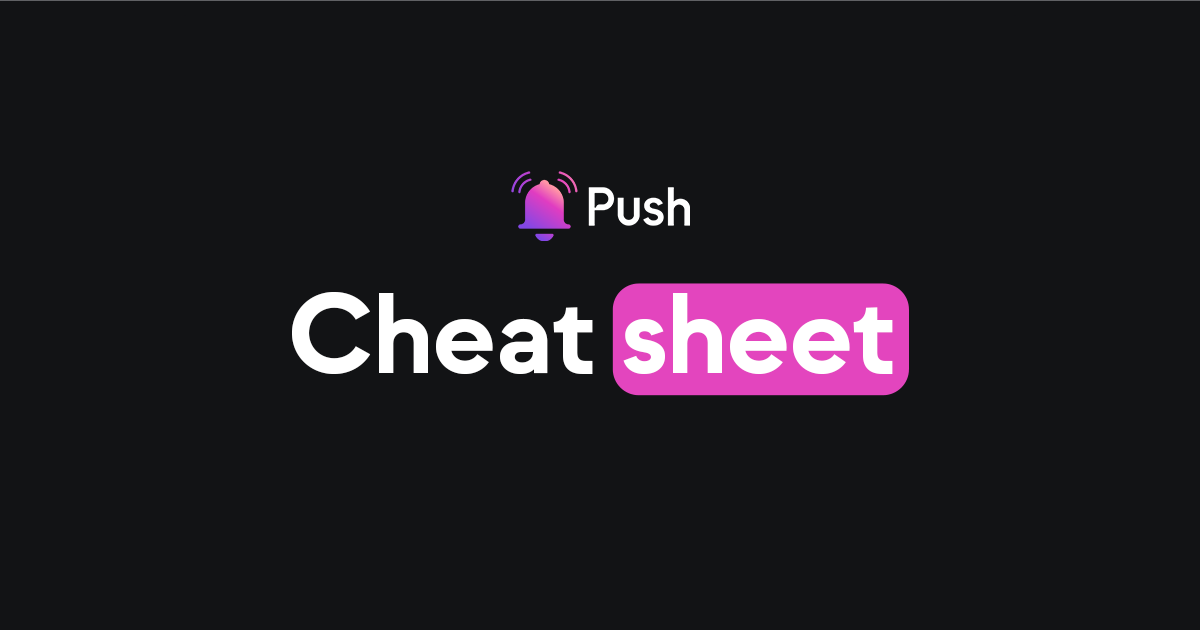
<style>
.page{position:relative;width:1200px;height:630px;background:#121315}
.page>*{position:absolute;margin:0}
.t1{font:114.8px "Strawford-Bold";letter-spacing:-0.02em;color:#ffffff}
</style>
<div class="page">
<p class="t1" style="left:292px;top:292px;width:601px;height:83px">Cheat sheet</p>
</div>
